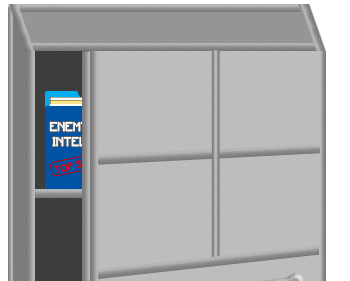
<style>
.page{position:relative;width:350px;height:281px;background:#bdbdbd}
.page>*{position:absolute;margin:0}
.t1{font:12px "Minecraft";color:#fefefe;font-weight:bold;scale:0.9 1}
.t2{font:9.3px "Minecraft";font-weight:bold;scale:0.9 1}
</style>
<div class="page">
<p class="t1" style="left:49px;top:121px;width:39px;height:26px;text-align:center">ENEMY<br>INTEL</p>
<p class="t2" style="left:53px;top:156px;width:48px;height:17px;rotate:-14deg">TOP SECR</p>
</div>
